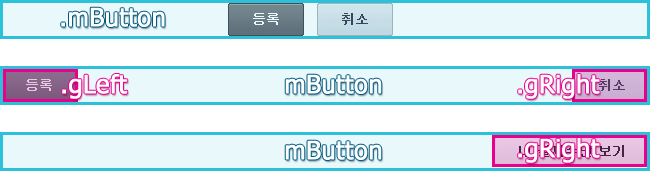
<style>
.page{position:relative;width:650px;height:171px;background:#e9f9fb}
.page>*{position:absolute;margin:0}
.t1{font:25px "Tahoma";color:#ffffff;font-weight:bold}
</style>
<div class="page">
<p class="t1" style="left:61px;top:7px;width:104px;height:20px">.mButton</p>
<p class="t1" style="left:62px;top:74px;width:66px;height:25px">.gLeft</p>
<p class="t1" style="left:285px;top:74px;width:97px;height:20px">mButton</p>
<p class="t1" style="left:518px;top:74px;width:82px;height:25px">.gRight</p>
<p class="t1" style="left:285px;top:140px;width:97px;height:20px">mButton</p>
<p class="t1" style="left:518px;top:138px;width:82px;height:25px">.gRight</p>
</div>
